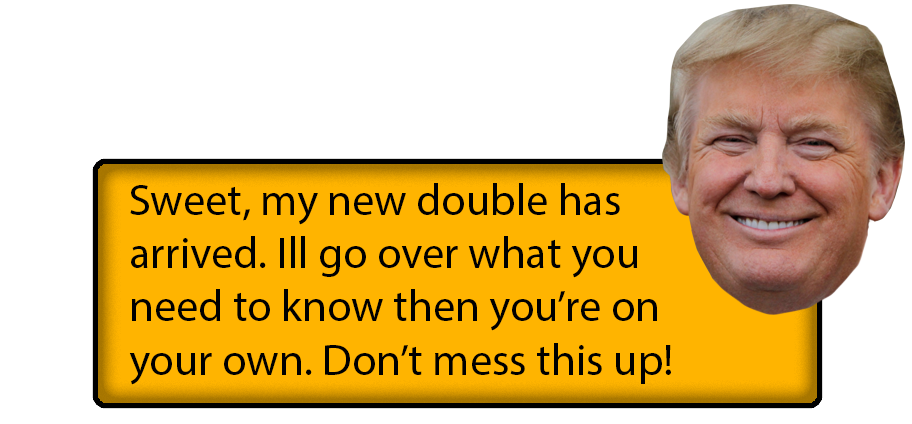
<style>
.page{position:relative;width:912px;height:424px;background:#ffffff}
.page>*{position:absolute;margin:0}
.t1{font:44.4px "MyriadPro-Regular";color:#000000}
</style>
<div class="page">
<p class="t1" style="left:129px;top:183px;width:542px;height:202px">Sweet, my new double has<br>arrived. Ill go over what you<br>need to know then you’re on <br>your own. Don’t mess this up!</p>
</div>
